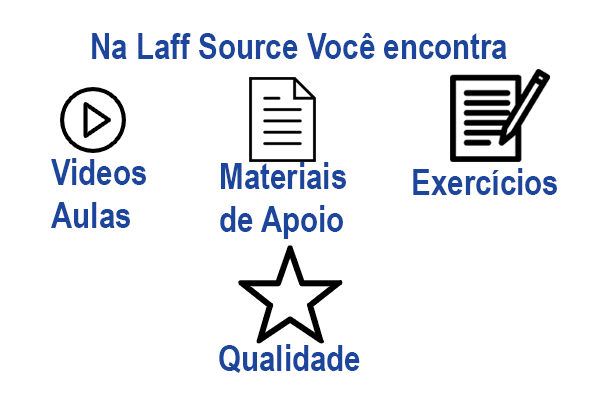
<style>
.page{position:relative;width:600px;height:400px;background:#ffffff}
.page>*{position:absolute;margin:0}
.t1{font:36px "ArialNarrow-Bold";color:#1b469c}
</style>
<div class="page">
<p class="t1" style="left:92px;top:33px;width:415px;height:26px">Na Laff Source Você encontra</p>
<p class="t1" style="left:51px;top:158px;width:95px;height:70px">Videos<br>Aulas</p>
<p class="t1" style="left:220px;top:162px;width:126px;height:77px">Materiais<br>de Apoio</p>
<p class="t1" style="left:413px;top:168px;width:144px;height:27px">Exercícios</p>
<p class="t1" style="left:219px;top:344px;width:141px;height:29px">Qualidade</p>
</div>
